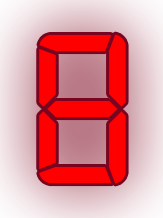
<style>
.page{position:relative;width:163px;height:218px}
.page>*{position:absolute;margin:0}
.t1{font:225.9px "Digital-7";color:#ff0000}
</style>
<div class="page">
<p class="t1" style="left:39px;top:34px;width:87px;height:150px">8</p>
</div>
